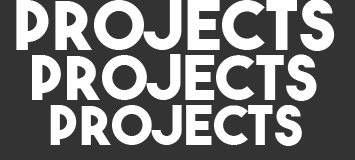
<style>
.page{position:relative;width:355px;height:160px;background:#333333}
.page>*{position:absolute;margin:0}
.t1{font:68.2px "TheBoldFont";color:#ffffff}
.t2{font:61px "TheBoldFont";color:#ffffff}
.t3{font:54px "TheBoldFont";color:#ffffff}
</style>
<div class="page">
<p class="t1" style="left:16px;top:0px;width:319px;height:51px">Projects</p>
<p class="t2" style="left:32px;top:54px;width:285px;height:47px">Projects</p>
<p class="t3" style="left:50px;top:105px;width:252px;height:41px">Projects</p>
</div>
